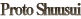
<style>
.page{position:relative;width:81px;height:19px;background:#ffffff}
.page>*{position:absolute;margin:0}
.t1{font:16px "RyuminPro-ExBold";letter-spacing:-0.115em;color:#4a3f32;font-weight:bold;scale:0.9 1}
</style>
<div class="page">
<p class="t1" style="left:0px;top:2px;width:82px;height:14px">Proto Shuusui</p>
</div>
